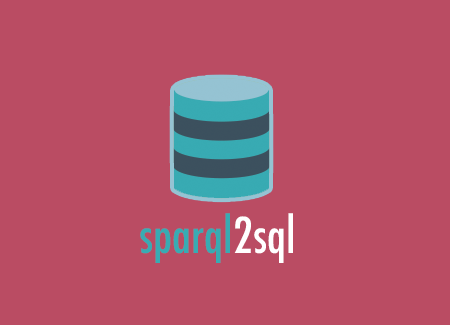
<style>
.page{position:relative;width:450px;height:325px;background:#ba4c63}
.page>*{position:absolute;margin:0}
.t1{font:48px "Futura-CondensedMedium";color:#38abb3}
.t2{font:48px "Futura-CondensedMedium";color:#ffffff}
</style>
<div class="page">
<p class="t1" style="left:140px;top:213px;width:153px;height:50px">sparql<span class="t2">2sql</span></p>
</div>
